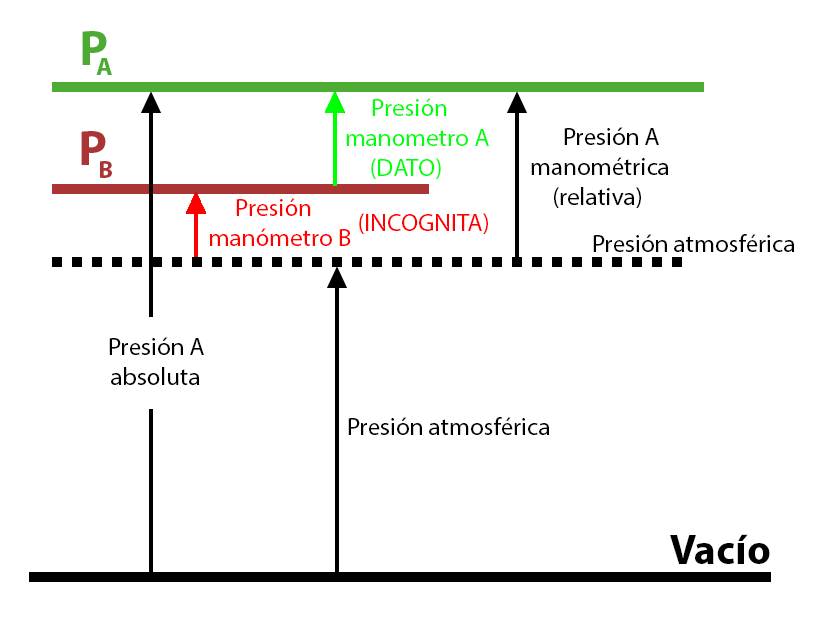
<style>
.page{position:relative;width:838px;height:622px;background:#ffffff}
.page>*{position:absolute;margin:0}
.t1{font:50px "MyriadPro-Bold";color:#4dab34}
.t2{font:25px "MyriadPro-Bold";color:#4dab34}
.t3{font:25px "MyriadPro-Regular";color:#00ff0c}
.t4{font:50px "MyriadPro-Bold";color:#ab3434}
.t5{font:25px "MyriadPro-Regular";color:#000000}
.t6{font:25px "MyriadPro-Bold";color:#ab3434}
.t7{font:25px "MyriadPro-Regular";color:#ff0000}
.t8{font:41.7px "MyriadPro-Bold";color:#000000}
</style>
<div class="page">
<p class="t1" style="left:82px;top:31px;width:25px;height:34px">P</p>
<p class="t2" style="left:96px;top:58px;width:16px;height:17px">A</p>
<p class="t3" style="left:346px;top:98px;width:143px;height:82px">Presión <br>manometro A<br>                       (DATO)</p>
<p class="t4" style="left:81px;top:131px;width:25px;height:34px">P</p>
<p class="t5" style="left:531px;top:127px;width:138px;height:82px">Presión A <br>              manométrica<br>             (relativa)</p>
<p class="t6" style="left:100px;top:161px;width:12px;height:17px">B</p>
<p class="t7" style="left:210px;top:198px;width:141px;height:48px"><span class="t3"> </span>    Presión <br>manómetro B</p>
<p class="t7" style="left:359px;top:213px;width:129px;height:22px">(INCOGNITA)</p>
<p class="t5" style="left:593px;top:234px;width:202px;height:18px">Presión atmosférica</p>
<p class="t5" style="left:109px;top:337px;width:95px;height:48px">Presión A <br>                  absoluta</p>
<p class="t5" style="left:348px;top:417px;width:202px;height:18px">Presión atmosférica</p>
<p class="t8" style="left:670px;top:534px;width:100px;height:30px">Vacío</p>
</div>
